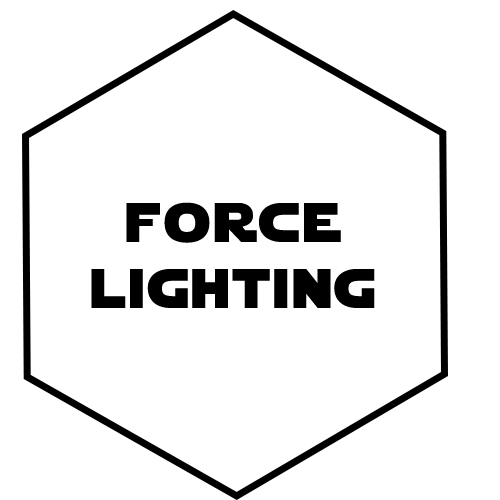
<style>
.page{position:relative;width:500px;height:500px;background:#ffffff}
.page>*{position:absolute;margin:0}
.t1{font:55px "StarJedi";letter-spacing:0.07em;color:#000000}
</style>
<div class="page">
<p class="t1" style="left:91px;top:202px;width:284px;height:106px;text-align:center">force<br>lighting</p>
</div>
